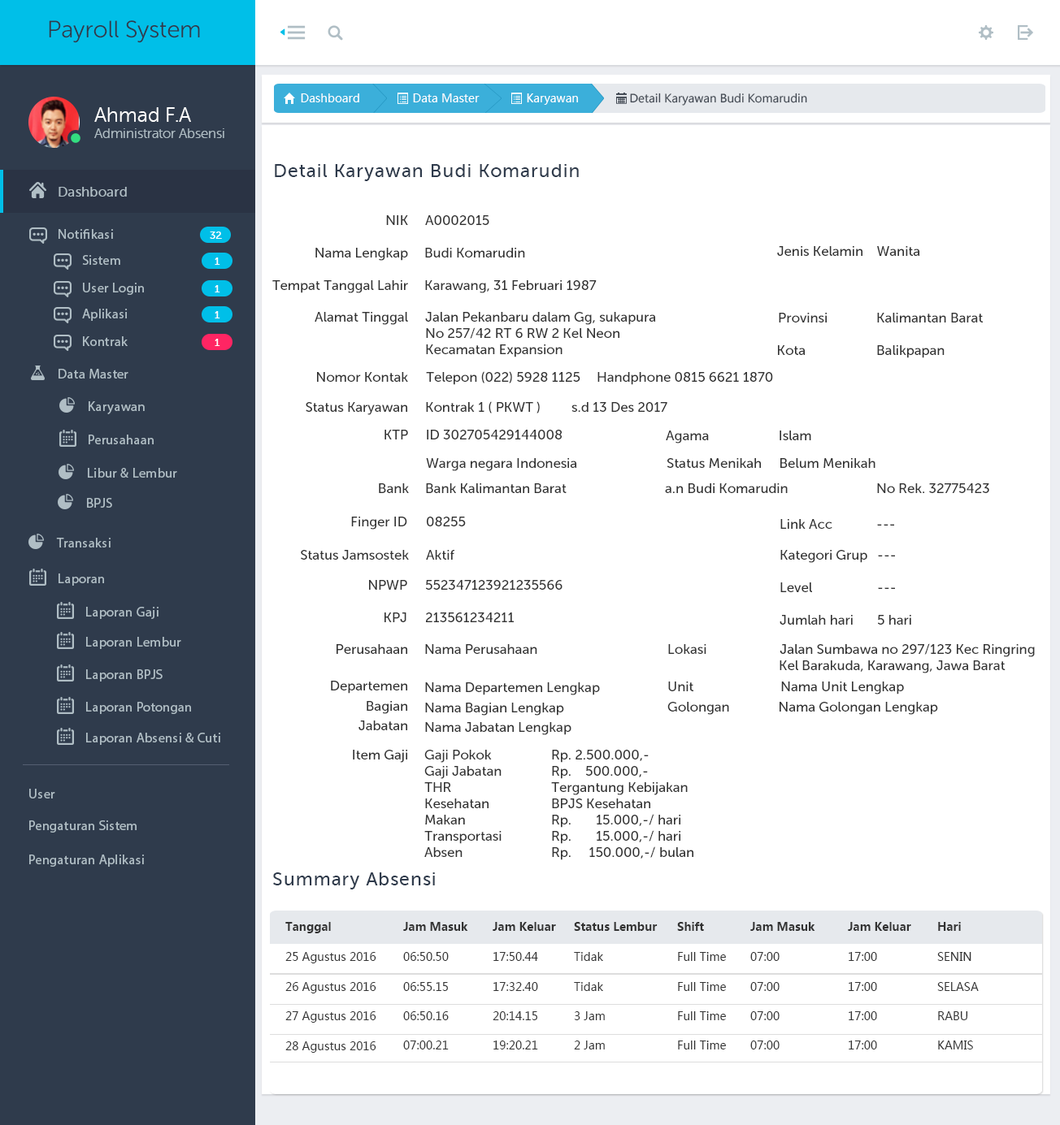
<style>
.page{position:relative;width:1060px;height:1125px;background:#ffffff}
.page>*{position:absolute;margin:0}
.t1{font:23.7px "MuseoSansRounded-300";color:#2f3b4c}
.t2{font:11.4px "MicrosoftYaHei";color:#ffffff}
.t3{font:11.2px "MicrosoftYaHei";color:#434a54}
.t4{font:13.5px "MuseoSansRounded-300";color:#b0bec5}
.t5{font:20.3px "MuseoSansRounded-300";color:#ffffff}
.t6{font:18.6px "MuseoSans-500";letter-spacing:0.04em;color:#2f3b4c}
.t7{font:13.5px "MuseoSans-500";letter-spacing:0.02em;color:#b0bec5}
.t8{font:13.5px "MuseoSans-500";color:#333333}
.t9{font:13.5px "MyriadPro-Regular";letter-spacing:0.02em;color:#b0bec5}
.t10{font:10.2px "MuseoSans-500";letter-spacing:0.02em;color:#ffffff}
.t11{font:13.5px/16.3px "MuseoSans-500";color:#333333}
.t12{font:11.4px "MicrosoftYaHei-Bold";color:#333333}
.t13{font:11.4px "MicrosoftYaHei";color:#333333}
</style>
<div class="page">
<p class="t1" style="left:49px;top:20px;width:151px;height:23px">Payroll System</p>
<p class="t2" style="left:301px;top:93px;width:58px;height:9px">Dashboard</p>
<p class="t2" style="left:413px;top:93px;width:66px;height:9px">Data Master</p>
<p class="t2" style="left:527px;top:93px;width:51px;height:12px">Karyawan</p>
<p class="t3" style="left:630px;top:93px;width:177px;height:13px">Detail Karyawan Budi Komarudin</p>
<p class="t4" style="left:94px;top:107px;width:130px;height:31px"><span class="t5">Ahmad F.A <br></span>Administrator Absensi</p>
<p class="t6" style="left:275px;top:164px;width:304px;height:17px">Detail Karyawan Budi Komarudin</p>
<p class="t7" style="left:59px;top:187px;width:68px;height:10px">Dashboard</p>
<p class="t8" style="left:386px;top:215px;width:22px;height:10px">NIK</p>
<p class="t8" style="left:425px;top:215px;width:64px;height:10px">A0002015</p>
<p class="t9" style="left:59px;top:229px;width:54px;height:10px">Notifikasi</p>
<p class="t10" style="left:210px;top:232px;width:12px;height:7px">32</p>
<p class="t9" style="left:82px;top:255px;width:38px;height:10px">Sistem</p>
<p class="t10" style="left:215px;top:258px;width:5px;height:7px">1</p>
<p class="t8" style="left:315px;top:248px;width:93px;height:13px">Nama Lengkap</p>
<p class="t8" style="left:425px;top:248px;width:100px;height:10px">Budi Komarudin</p>
<p class="t8" style="left:777px;top:246px;width:85px;height:10px">Jenis Kelamin</p>
<p class="t8" style="left:877px;top:246px;width:42px;height:10px">Wanita</p>
<p class="t8" style="left:272px;top:280px;width:136px;height:13px">Tempat Tanggal Lahir</p>
<p class="t8" style="left:425px;top:280px;width:171px;height:13px">Karawang, 31 Februari 1987</p>
<p class="t9" style="left:83px;top:283px;width:61px;height:12px">User Login</p>
<p class="t10" style="left:215px;top:285px;width:5px;height:8px">1</p>
<p class="t9" style="left:82px;top:309px;width:46px;height:12px">Aplikasi</p>
<p class="t10" style="left:215px;top:311px;width:5px;height:8px">1</p>
<p class="t8" style="left:314px;top:312px;width:94px;height:13px">Alamat Tinggal</p>
<p class="t11" style="left:425px;top:312px;width:230px;height:46px">Jalan Pekanbaru dalam Gg, sukapura <br>No 257/42 RT 6 RW 2 Kel Neon <br>Kecamatan Expansion</p>
<p class="t8" style="left:778px;top:313px;width:48px;height:10px">Provinsi</p>
<p class="t8" style="left:877px;top:313px;width:105px;height:10px">Kalimantan Barat</p>
<p class="t9" style="left:83px;top:336px;width:45px;height:10px">Kontrak</p>
<p class="t10" style="left:215px;top:339px;width:5px;height:7px">1</p>
<p class="t8" style="left:778px;top:345px;width:26px;height:10px">Kota</p>
<p class="t8" style="left:877px;top:345px;width:67px;height:13px">Balikpapan</p>
<p class="t9" style="left:59px;top:369px;width:69px;height:10px">Data Master</p>
<p class="t8" style="left:317px;top:372px;width:91px;height:10px">Nomor Kontak</p>
<p class="t8" style="left:426px;top:371px;width:154px;height:14px">Telepon (022) 5928 1125</p>
<p class="t8" style="left:597px;top:372px;width:176px;height:13px">Handphone 0815 6621 1870</p>
<p class="t9" style="left:89px;top:401px;width:56px;height:13px">Karyawan</p>
<p class="t8" style="left:426px;top:401px;width:241px;height:13px">Kontrak 1 ( PKWT )  s.d 13 Des 2017</p>
<p class="t8" style="left:306px;top:402px;width:101px;height:13px">Status Karyawan</p>
<p class="t9" style="left:89px;top:435px;width:65px;height:9px">Perusahaan</p>
<p class="t8" style="left:384px;top:430px;width:24px;height:10px">KTP</p>
<p class="t8" style="left:427px;top:430px;width:134px;height:10px">ID 302705429144008</p>
<p class="t8" style="left:665px;top:431px;width:146px;height:13px">Agama                    Islam</p>
<p class="t8" style="left:426px;top:458px;width:150px;height:13px">Warga negara Indonesia</p>
<p class="t8" style="left:666px;top:458px;width:209px;height:10px">Status Menikah     Belum Menikah</p>
<p class="t9" style="left:88px;top:468px;width:89px;height:10px">Libur &amp; Lembur</p>
<p class="t8" style="left:379px;top:483px;width:30px;height:10px">Bank</p>
<p class="t8" style="left:426px;top:483px;width:140px;height:10px">Bank Kalimantan Barat</p>
<p class="t8" style="left:665px;top:483px;width:122px;height:10px">a.n Budi Komarudin</p>
<p class="t8" style="left:877px;top:483px;width:112px;height:10px">No Rek. 32775423</p>
<p class="t9" style="left:87px;top:498px;width:25px;height:10px">BPJS</p>
<p class="t8" style="left:351px;top:517px;width:56px;height:13px">Finger ID</p>
<p class="t8" style="left:427px;top:517px;width:39px;height:10px">08255</p>
<p class="t8" style="left:780px;top:519px;width:52px;height:10px">Link Acc</p>
<p class="t8" style="left:877px;top:524px;width:17px;height:2px">---</p>
<p class="t9" style="left:56px;top:538px;width:55px;height:10px">Transaksi</p>
<p class="t8" style="left:301px;top:550px;width:108px;height:10px">Status Jamsostek</p>
<p class="t8" style="left:426px;top:550px;width:28px;height:10px">Aktif</p>
<p class="t8" style="left:780px;top:550px;width:87px;height:13px">Kategori Grup</p>
<p class="t8" style="left:878px;top:555px;width:17px;height:2px">---</p>
<p class="t9" style="left:59px;top:574px;width:45px;height:12px">Laporan</p>
<p class="t8" style="left:369px;top:580px;width:38px;height:10px">NPWP</p>
<p class="t8" style="left:426px;top:580px;width:136px;height:10px">552347123921235566</p>
<p class="t8" style="left:780px;top:583px;width:32px;height:9px">Level</p>
<p class="t8" style="left:878px;top:587px;width:17px;height:2px">---</p>
<p class="t9" style="left:86px;top:607px;width:72px;height:12px">Laporan Gaji</p>
<p class="t8" style="left:384px;top:613px;width:22px;height:9px">KPJ</p>
<p class="t8" style="left:426px;top:613px;width:88px;height:9px">213561234211</p>
<p class="t8" style="left:779px;top:615px;width:73px;height:10px">Jumlah hari</p>
<p class="t8" style="left:878px;top:615px;width:33px;height:10px">5 hari</p>
<p class="t9" style="left:86px;top:637px;width:95px;height:12px">Laporan Lembur</p>
<p class="t8" style="left:336px;top:644px;width:71px;height:10px">Perusahaan</p>
<p class="t8" style="left:425px;top:644px;width:112px;height:10px">Nama Perusahaan</p>
<p class="t11" style="left:668px;top:644px;width:366px;height:30px">Lokasi                     Jalan Sumbawa no 297/123 Kec Ringring <br>                                Kel Barakuda, Karawang, Jawa Barat</p>
<p class="t9" style="left:86px;top:670px;width:77px;height:12px">Laporan BPJS</p>
<p class="t8" style="left:331px;top:681px;width:76px;height:13px">Departemen</p>
<p class="t8" style="left:425px;top:683px;width:175px;height:13px">Nama Departemen Lengkap</p>
<p class="t8" style="left:668px;top:682px;width:236px;height:13px">Unit                         Nama Unit Lengkap</p>
<p class="t8" style="left:366px;top:701px;width:41px;height:13px">Bagian</p>
<p class="t9" style="left:86px;top:702px;width:105px;height:12px">Laporan Potongan</p>
<p class="t8" style="left:425px;top:703px;width:139px;height:13px">Nama Bagian Lengkap</p>
<p class="t8" style="left:667px;top:702px;width:271px;height:13px">Golongan              Nama Golongan Lengkap</p>
<p class="t8" style="left:358px;top:721px;width:49px;height:9px">Jabatan</p>
<p class="t8" style="left:425px;top:722px;width:146px;height:13px">Nama Jabatan Lengkap</p>
<p class="t9" style="left:86px;top:733px;width:134px;height:12px">Laporan Absensi &amp; Cuti</p>
<p class="t8" style="left:353px;top:750px;width:54px;height:13px">Item Gaji</p>
<p class="t8" style="left:424px;top:750px;width:68px;height:13px">Gaji Pokok</p>
<p class="t8" style="left:552px;top:750px;width:96px;height:13px">Rp. 2.500.000,-</p>
<p class="t8" style="left:424px;top:766px;width:77px;height:13px">Gaji Jabatan</p>
<p class="t8" style="left:552px;top:766px;width:96px;height:13px">Rp.    500.000,-</p>
<p class="t8" style="left:424px;top:782px;width:27px;height:10px">THR</p>
<p class="t8" style="left:551px;top:782px;width:136px;height:13px">Tergantung Kebijakan</p>
<p class="t9" style="left:29px;top:789px;width:26px;height:10px">User</p>
<p class="t8" style="left:425px;top:799px;width:63px;height:9px">Kesehatan</p>
<p class="t8" style="left:552px;top:799px;width:98px;height:9px">BPJS Kesehatan</p>
<p class="t9" style="left:29px;top:821px;width:108px;height:12px">Pengaturan Sistem</p>
<p class="t8" style="left:425px;top:815px;width:40px;height:10px">Makan</p>
<p class="t8" style="left:552px;top:814px;width:128px;height:14px">Rp.       15.000,-/ hari</p>
<p class="t8" style="left:424px;top:831px;width:77px;height:13px">Transportasi</p>
<p class="t8" style="left:552px;top:830px;width:128px;height:14px">Rp.       15.000,-/ hari</p>
<p class="t9" style="left:29px;top:855px;width:115px;height:12px">Pengaturan Aplikasi</p>
<p class="t8" style="left:424px;top:847px;width:38px;height:10px">Absen</p>
<p class="t8" style="left:552px;top:847px;width:141px;height:13px">Rp.     150.000,-/ bulan</p>
<p class="t6" style="left:273px;top:873px;width:162px;height:17px">Summary Absensi</p>
<p class="t12" style="left:285px;top:922px;width:46px;height:12px">Tanggal</p>
<p class="t12" style="left:403px;top:922px;width:65px;height:9px">Jam Masuk</p>
<p class="t12" style="left:492px;top:922px;width:64px;height:9px">Jam Keluar</p>
<p class="t12" style="left:574px;top:922px;width:83px;height:9px">Status Lembur</p>
<p class="t12" style="left:677px;top:922px;width:27px;height:9px">Shift</p>
<p class="t12" style="left:750px;top:922px;width:65px;height:9px">Jam Masuk</p>
<p class="t12" style="left:847px;top:922px;width:64px;height:9px">Jam Keluar</p>
<p class="t12" style="left:938px;top:922px;width:22px;height:9px">Hari</p>
<p class="t13" style="left:285px;top:952px;width:91px;height:12px">25 Agustus 2016</p>
<p class="t13" style="left:403px;top:952px;width:46px;height:9px">06:50.50</p>
<p class="t13" style="left:493px;top:952px;width:45px;height:9px">17:50.44</p>
<p class="t13" style="left:574px;top:952px;width:29px;height:9px">Tidak</p>
<p class="t13" style="left:678px;top:952px;width:48px;height:9px">Full Time</p>
<p class="t13" style="left:750px;top:952px;width:29px;height:9px">07:00</p>
<p class="t13" style="left:848px;top:952px;width:29px;height:9px">17:00</p>
<p class="t13" style="left:937px;top:952px;width:34px;height:9px">SENIN</p>
<p class="t13" style="left:285px;top:982px;width:91px;height:12px">26 Agustus 2016</p>
<p class="t13" style="left:403px;top:982px;width:45px;height:9px">06:55.15</p>
<p class="t13" style="left:493px;top:982px;width:45px;height:9px">17:32.40</p>
<p class="t13" style="left:574px;top:982px;width:29px;height:9px">Tidak</p>
<p class="t13" style="left:678px;top:982px;width:48px;height:9px">Full Time</p>
<p class="t13" style="left:750px;top:982px;width:29px;height:9px">07:00</p>
<p class="t13" style="left:848px;top:982px;width:29px;height:9px">17:00</p>
<p class="t13" style="left:937px;top:982px;width:41px;height:9px">SELASA</p>
<p class="t13" style="left:285px;top:1012px;width:91px;height:11px">27 Agustus 2016</p>
<p class="t13" style="left:403px;top:1012px;width:46px;height:9px">06:50.16</p>
<p class="t13" style="left:492px;top:1012px;width:45px;height:9px">20:14.15</p>
<p class="t13" style="left:574px;top:1012px;width:31px;height:9px">3 Jam</p>
<p class="t13" style="left:678px;top:1012px;width:48px;height:9px">Full Time</p>
<p class="t13" style="left:750px;top:1012px;width:29px;height:9px">07:00</p>
<p class="t13" style="left:848px;top:1012px;width:29px;height:9px">17:00</p>
<p class="t13" style="left:938px;top:1012px;width:30px;height:9px">RABU</p>
<p class="t13" style="left:285px;top:1042px;width:91px;height:11px">28 Agustus 2016</p>
<p class="t13" style="left:403px;top:1041px;width:46px;height:9px">07:00.21</p>
<p class="t13" style="left:493px;top:1041px;width:45px;height:9px">19:20.21</p>
<p class="t13" style="left:574px;top:1041px;width:31px;height:9px">2 Jam</p>
<p class="t13" style="left:678px;top:1041px;width:48px;height:9px">Full Time</p>
<p class="t13" style="left:750px;top:1041px;width:29px;height:9px">07:00</p>
<p class="t13" style="left:848px;top:1041px;width:29px;height:9px">17:00</p>
<p class="t13" style="left:938px;top:1041px;width:35px;height:9px">KAMIS</p>
</div>
